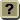
<style>
.page{position:relative;width:20px;height:20px;background:#98926c}
.page>*{position:absolute;margin:0}
.t1{font:13.8px "Arial-BoldMT";letter-spacing:0.01em;color:#000000;font-weight:bold;scale:1.08 1}
</style>
<div class="page">
<p class="t1" style="left:5px;top:3px;width:9px;height:12px">?</p>
</div>
